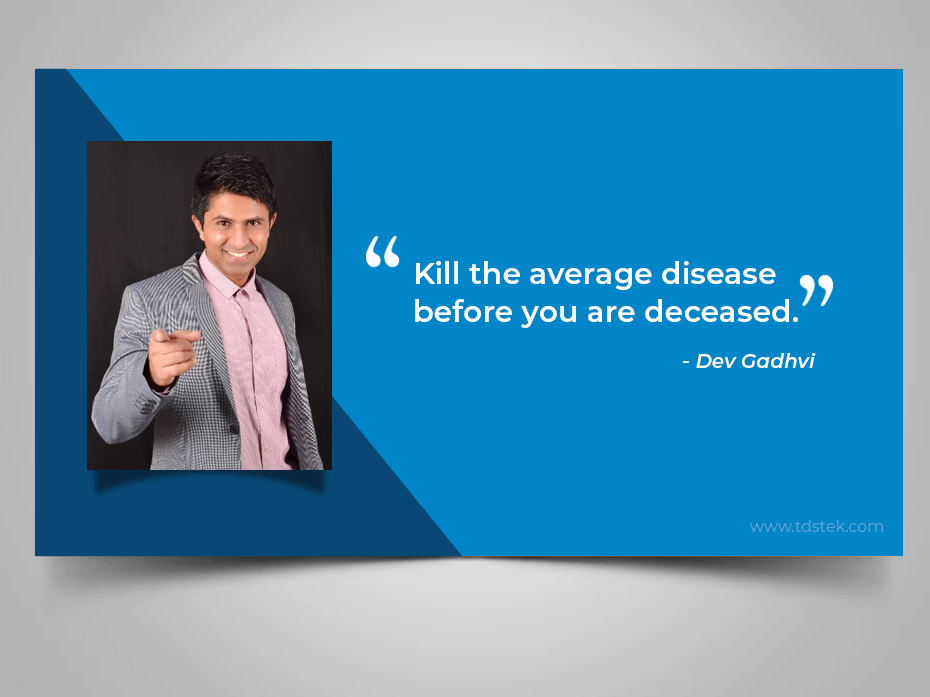
<style>
.page{position:relative;width:930px;height:697px;background:#0085c9}
.page>*{position:absolute;margin:0}
.t1{font:30px/38px "Montserrat-SemiBold";color:#ffffff}
.t2{font:20px "Montserrat-SemiBoldItalic";color:#ffffff}
.t3{font:16px "Montserrat-Regular";color:#58a2d4}
</style>
<div class="page">
<p class="t1" style="left:415px;top:261px;width:383px;height:67px">Kill the average disease <br>before you are deceased.</p>
<p class="t2" style="left:683px;top:353px;width:133px;height:15px">- Dev Gadhvi</p>
<p class="t3" style="left:750px;top:520px;width:133px;height:12px">www.tdstek.com</p>
</div>
